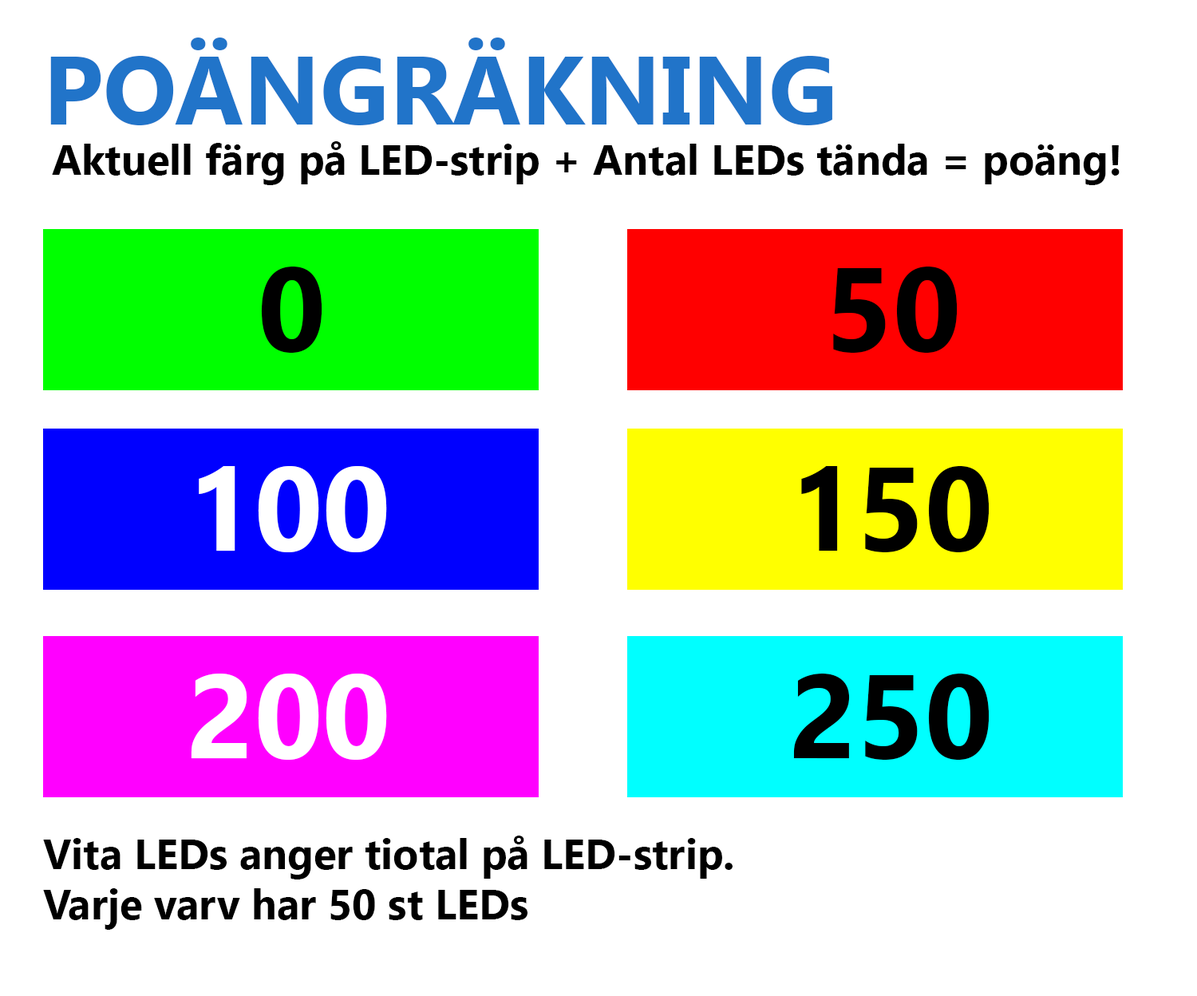
<style>
.page{position:relative;width:1197px;height:996px;background:#ffffff}
.page>*{position:absolute;margin:0}
.t1{font:97.2px "Gadugi-Bold";color:#2174c9}
.t2{font:42.1px "Gadugi-Bold";color:#000000}
.t3{font:117.9px "Gadugi-Bold";color:#000000}
.t4{font:117.9px "Gadugi-Bold";color:#ffffff}
</style>
<div class="page">
<p class="t1" style="left:50px;top:38px;width:782px;height:87px">POÄNGRÄKNING</p>
<p class="t2" style="left:52px;top:141px;width:1068px;height:44px">Aktuell färg på LED-strip + Antal LEDs tända = poäng!</p>
<p class="t3" style="left:261px;top:267px;width:61px;height:86px">0</p>
<p class="t3" style="left:833px;top:267px;width:125px;height:86px">50</p>
<p class="t4" style="left:199px;top:466px;width:188px;height:86px">100</p>
<p class="t3" style="left:801px;top:466px;width:189px;height:86px">150</p>
<p class="t4" style="left:191px;top:674px;width:196px;height:86px">200</p>
<p class="t3" style="left:793px;top:674px;width:197px;height:86px">250</p>
<p class="t2" style="left:43px;top:836px;width:690px;height:94px">Vita LEDs anger tiotal på LED-strip.<br>Varje varv har 50 st LEDs</p>
</div>
